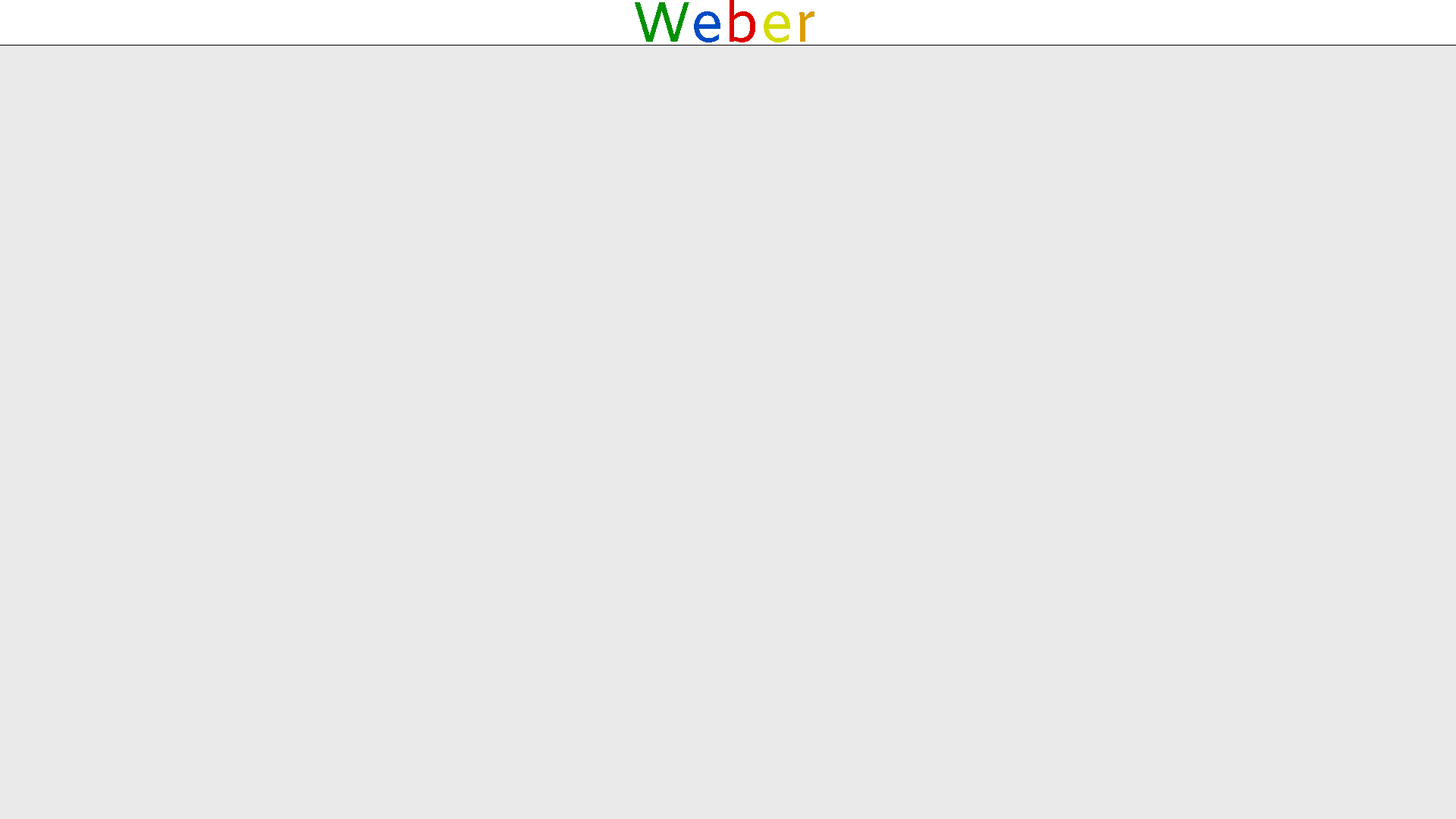
<style>
.page{position:relative;width:1456px;height:819px;background:#eaeaea}
.page>*{position:absolute;margin:0}
.t1{font:56.9px "Amiko-Regular";color:#009102}
.t2{font:56.9px "Amiko-Regular";color:#004bc4}
.t3{font:56.9px "Amiko-Regular";color:#dc0000}
.t4{font:56.9px "Amiko-Regular";color:#d4db00}
.t5{font:56.9px "Amiko-Regular";color:#db9d00}
</style>
<div class="page">
<p class="t1" style="left:635px;top:0px;width:179px;height:42px">W<span class="t2">e</span><span class="t3">b</span><span class="t4">e</span><span class="t5">r</span></p>
</div>
